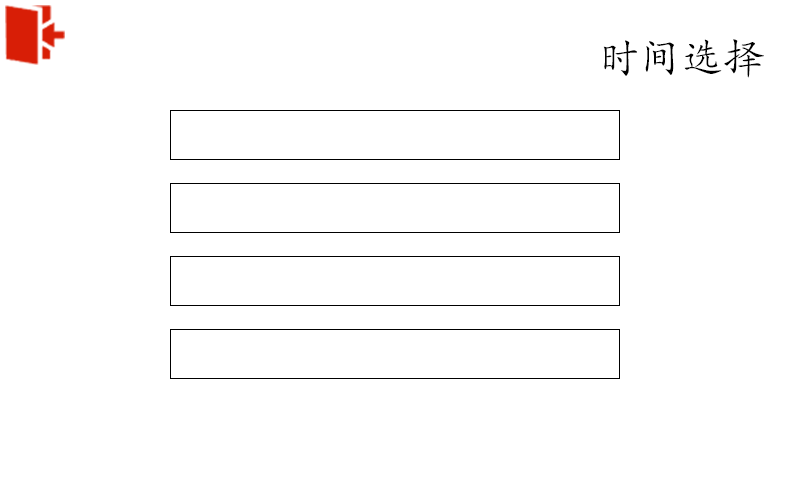
<style>
.page{position:relative;width:800px;height:480px;background:#ffffff}
.page>*{position:absolute;margin:0}
.t1{font:41.7px "STKaiti";color:#000000}
</style>
<div class="page">
<p class="t1" style="left:603px;top:39px;width:161px;height:39px">时间选择</p>
</div>
